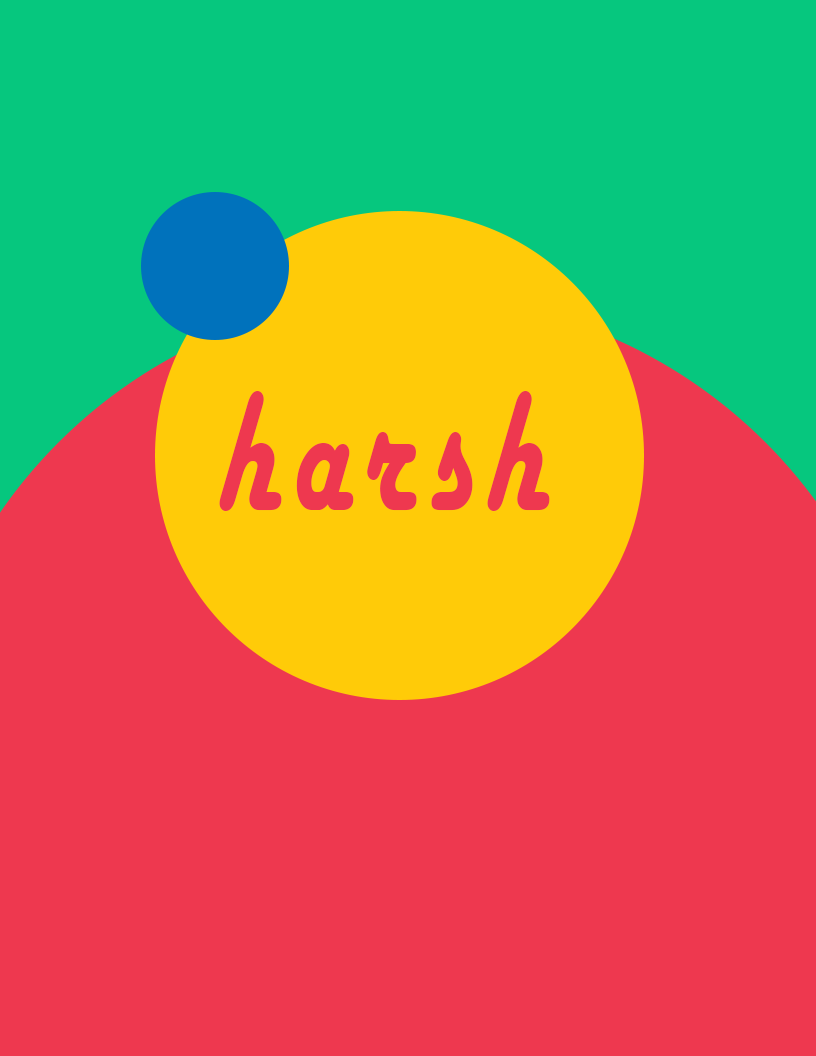
<style>
.page{position:relative;width:816px;height:1056px;background:#ee384f}
.page>*{position:absolute;margin:0}
.t1{font:175.6px "HarlowSolid";letter-spacing:0.1em;color:#ee384f;scale:0.72 1}
</style>
<div class="page">
<p class="t1" style="left:219px;top:391px;width:331px;height:120px">harsh</p>
</div>
